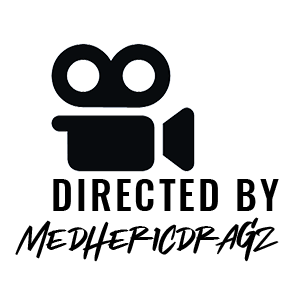
<style>
.page{position:relative;width:300px;height:300px;background:#ffffff}
.page>*{position:absolute;margin:0}
.t1{font:38.9px "Oswald-Medium";letter-spacing:0.08em;color:#000000}
.t2{font:38.9px "ShockwaveRegular";color:#000000}
</style>
<div class="page">
<p class="t1" style="left:53px;top:179px;width:226px;height:32px">DIRECTED BY</p>
<p class="t2" style="left:15px;top:217px;width:264px;height:45px">Medhericdragz</p>
</div>
